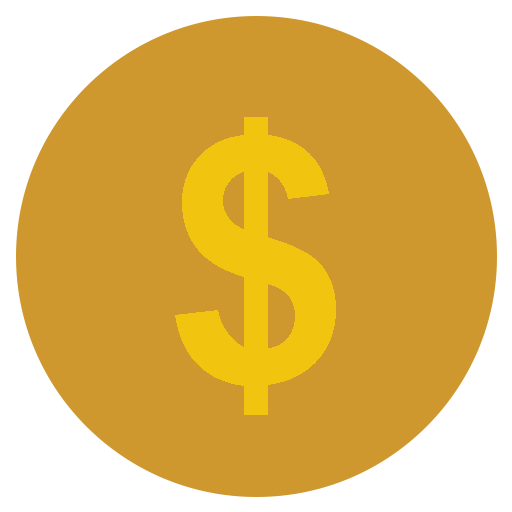
<style>
.page{position:relative;width:512px;height:512px;background:#cf982e}
.page>*{position:absolute;margin:0}
.t1{font:339.4px "Arial-BoldMT";letter-spacing:0.1em;color:#f1c410}
</style>
<div class="page">
<p class="t1" style="left:175px;top:117px;width:161px;height:298px">$</p>
</div>
